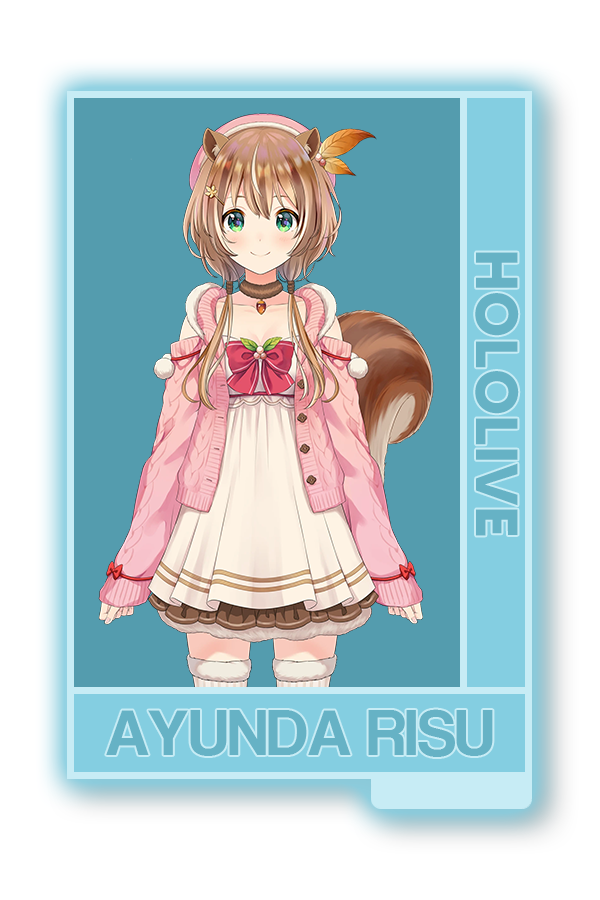
<style>
.page{position:relative;width:600px;height:900px;background:#ffffff}
.page>*{position:absolute;margin:0}
.t1{font:59.2px "MADETOMMY-Bold";color:#66b2c5}
.t2{font:66.8px "CoolveticaRg-Regular";color:#66b2c5}
</style>
<div class="page">
<p class="t1" style="left:475px;top:252px;width:44px;height:284px;rotate:90deg">HOLOLIVE</p>
<p class="t2" style="left:106px;top:709px;width:387px;height:48px">AYUNDA RISU</p>
</div>
